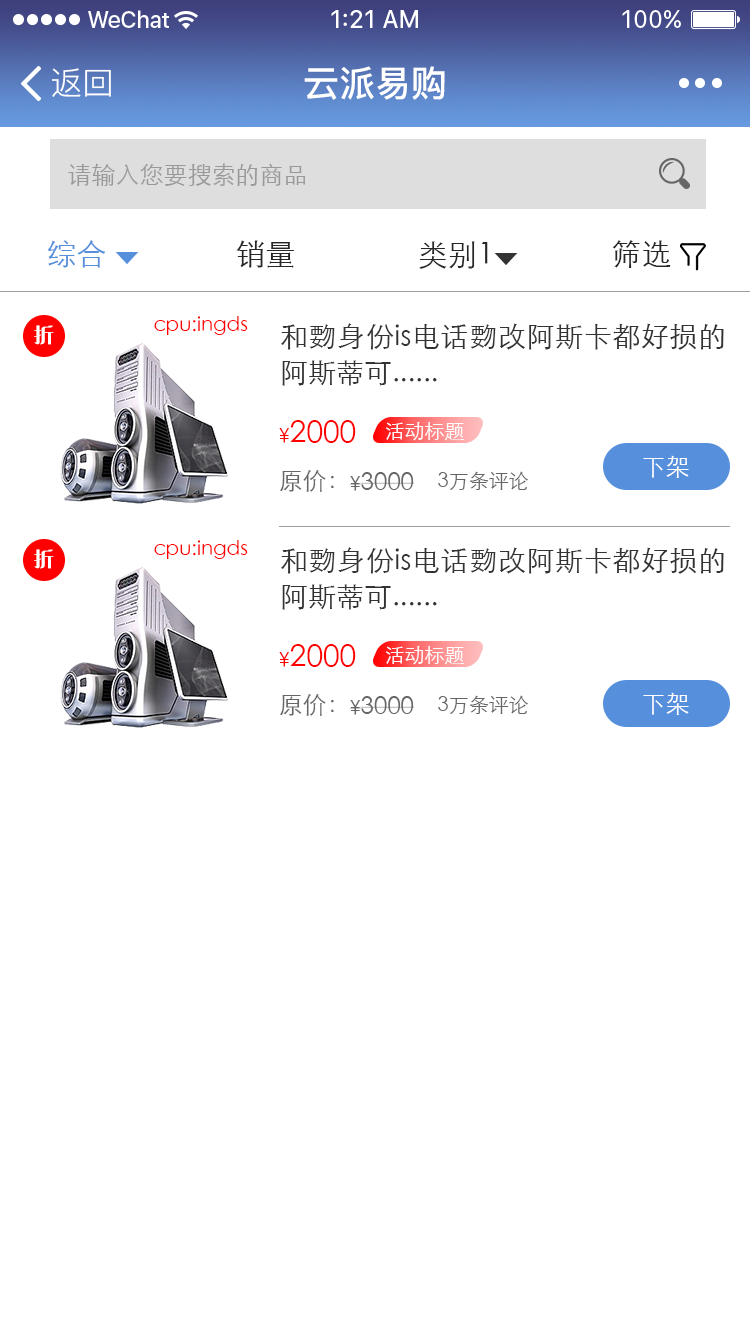
<style>
.page{position:relative;width:750px;height:1334px;background:#ffffff}
.page>*{position:absolute;margin:0}
.t1{font:32px "PingFang-SC-Regular";color:#ffffff}
.t2{font:36px "PingFang-SC-Bold";color:#ffffff}
.t3{font:24px "STXihei";color:#999999}
.t4{font:30px "STXihei";color:#568fdc}
.t5{font:30px "STXihei";color:#262626}
.t6{font:20px "STXihei";color:#ff0000}
.t7{font:20px "FZCQJW--GB1-0";color:#ffffff}
.t8{font:28px/36px "STXihei";color:#333333}
.t9{font:30px "STXihei";color:#ff0000}
.t10{font:20px "STXihei";color:#ffffff}
.t11{font:24px "STXihei";color:#ffffff}
.t12{font:24px "STXihei";color:#666666}
.t13{font:20px "STXihei";color:#666666}
</style>
<div class="page">
<p class="t1" style="left:52px;top:68px;width:59px;height:29px">返回</p>
<p class="t2" style="left:304px;top:66px;width:141px;height:34px">云派易购</p>
<p class="t3" style="left:68px;top:163px;width:238px;height:23px">请输入您要搜索的商品</p>
<p class="t4" style="left:47px;top:240px;width:59px;height:28px">综合</p>
<p class="t5" style="left:236px;top:240px;width:58px;height:28px">销量</p>
<p class="t5" style="left:419px;top:241px;width:69px;height:28px">类别1</p>
<p class="t5" style="left:612px;top:240px;width:59px;height:28px">筛选</p>
<p class="t6" style="left:154px;top:316px;width:94px;height:19px">cpu:ingds</p>
<p class="t7" style="left:34px;top:325px;width:20px;height:20px">折</p>
<p class="t8" style="left:281px;top:323px;width:443px;height:63px;text-align:justify">和覅身份is电话覅改阿斯卡都好损的阿斯蒂可......</p>
<p class="t9" style="left:279px;top:420px;width:77px;height:23px"><span class="t6">¥</span>2000</p>
<p class="t10" style="left:386px;top:422px;width:78px;height:19px">活动标题</p>
<p class="t11" style="left:643px;top:455px;width:46px;height:23px">下架</p>
<p class="t12" style="left:280px;top:470px;width:54px;height:22px">原价：</p>
<p class="t12" style="left:349px;top:472px;width:65px;height:19px"><span class="t13">¥</span>3000</p>
<p class="t13" style="left:438px;top:471px;width:90px;height:19px">3万条评论</p>
<p class="t6" style="left:154px;top:540px;width:94px;height:19px">cpu:ingds</p>
<p class="t7" style="left:34px;top:549px;width:20px;height:20px">折</p>
<p class="t8" style="left:281px;top:547px;width:443px;height:63px;text-align:justify">和覅身份is电话覅改阿斯卡都好损的阿斯蒂可......</p>
<p class="t9" style="left:279px;top:644px;width:77px;height:23px"><span class="t6">¥</span>2000</p>
<p class="t10" style="left:386px;top:646px;width:78px;height:19px">活动标题</p>
<p class="t12" style="left:280px;top:694px;width:54px;height:22px">原价：</p>
<p class="t12" style="left:349px;top:696px;width:65px;height:19px"><span class="t13">¥</span>3000</p>
<p class="t13" style="left:438px;top:695px;width:90px;height:19px">3万条评论</p>
<p class="t11" style="left:643px;top:692px;width:46px;height:23px">下架</p>
</div>
